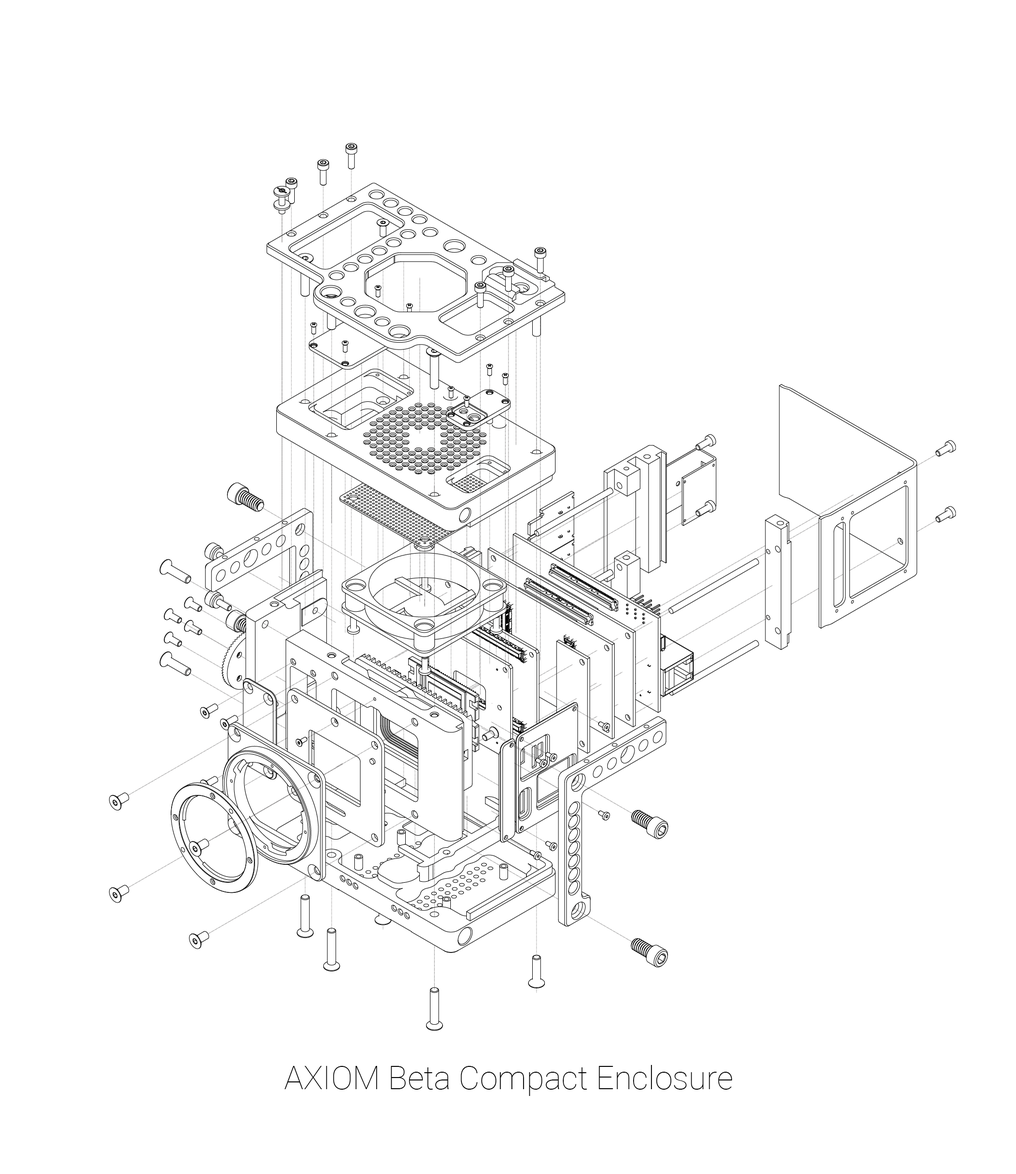
<style>
.page{position:relative;width:1016px;height:1174px;background:#ffffff}
.page>*{position:absolute;margin:0}
.t1{font:32.3px "Roboto-Thin";color:#000000}
</style>
<div class="page">
<p class="t1" style="left:284px;top:1065px;width:448px;height:31px">AXIOM Beta Compact Enclosure</p>
</div>
